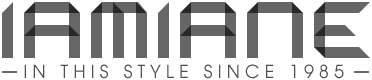
<style>
.page{position:relative;width:372px;height:80px;background:#ffffff}
.page>*{position:absolute;margin:0}
.t1{font:18px "TeXGyreAdventor-Regular";color:#4f4f4f;text-transform:uppercase}
</style>
<div class="page">
<p class="t1" style="left:24px;top:64px;width:320px;height:15px">I N   T H I S   S T Y L E   S I N C E   1 9 8 5</p>
</div>
